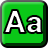
<style>
.page{position:relative;width:48px;height:48px;background:#0ac818}
.page>*{position:absolute;margin:0}
.t1{font:32px "Roboto-Black"}
</style>
<div class="page">
<p class="t1" style="left:4px;top:10px;width:39px;height:23px">Aa</p>
</div>
